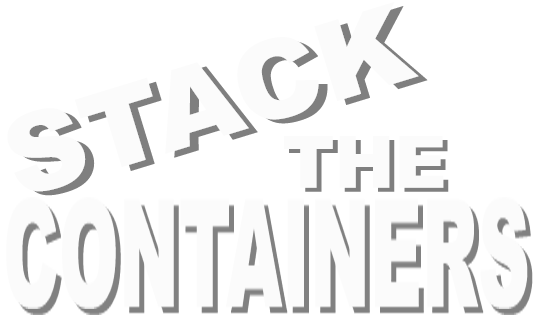
<style>
.page{position:relative;width:544px;height:323px;background:#ffffff}
.page>*{position:absolute;margin:0}
.t1{font:108.7px "Arial-Black"}
.t2{font:72px "Arial-Black";color:#fbfbfb}
.t3{font:72px "Arial-Black"}
</style>
<div class="page">
<p class="t1" style="left:16px;top:6px;width:412px;height:190px;rotate:-17deg">STACK</p>
<p class="t2" style="left:284px;top:136px;width:160px;height:52px">THE</p>
<p class="t3" style="left:289px;top:140px;width:160px;height:52px">THE</p>
</div>
